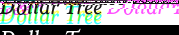
<style>
.page{position:relative;width:179px;height:35px;background:#ffffff}
.page>*{position:absolute;margin:0}
.t1{font:30px "MrsEavesItalic"}
</style>
<div class="page">
<p class="t1" style="left:0px;top:3px;width:102px;height:22px">Dollar Tree</p>
</div>
